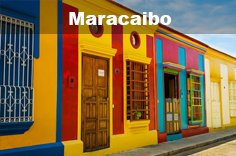
<style>
.page{position:relative;width:236px;height:156px}
.page>*{position:absolute;margin:0}
.t1{font:18px "Arial-Black";color:#ffffff}
</style>
<div class="page">
<p class="t1" style="left:69px;top:12px;width:103px;height:13px">Maracaibo</p>
</div>
